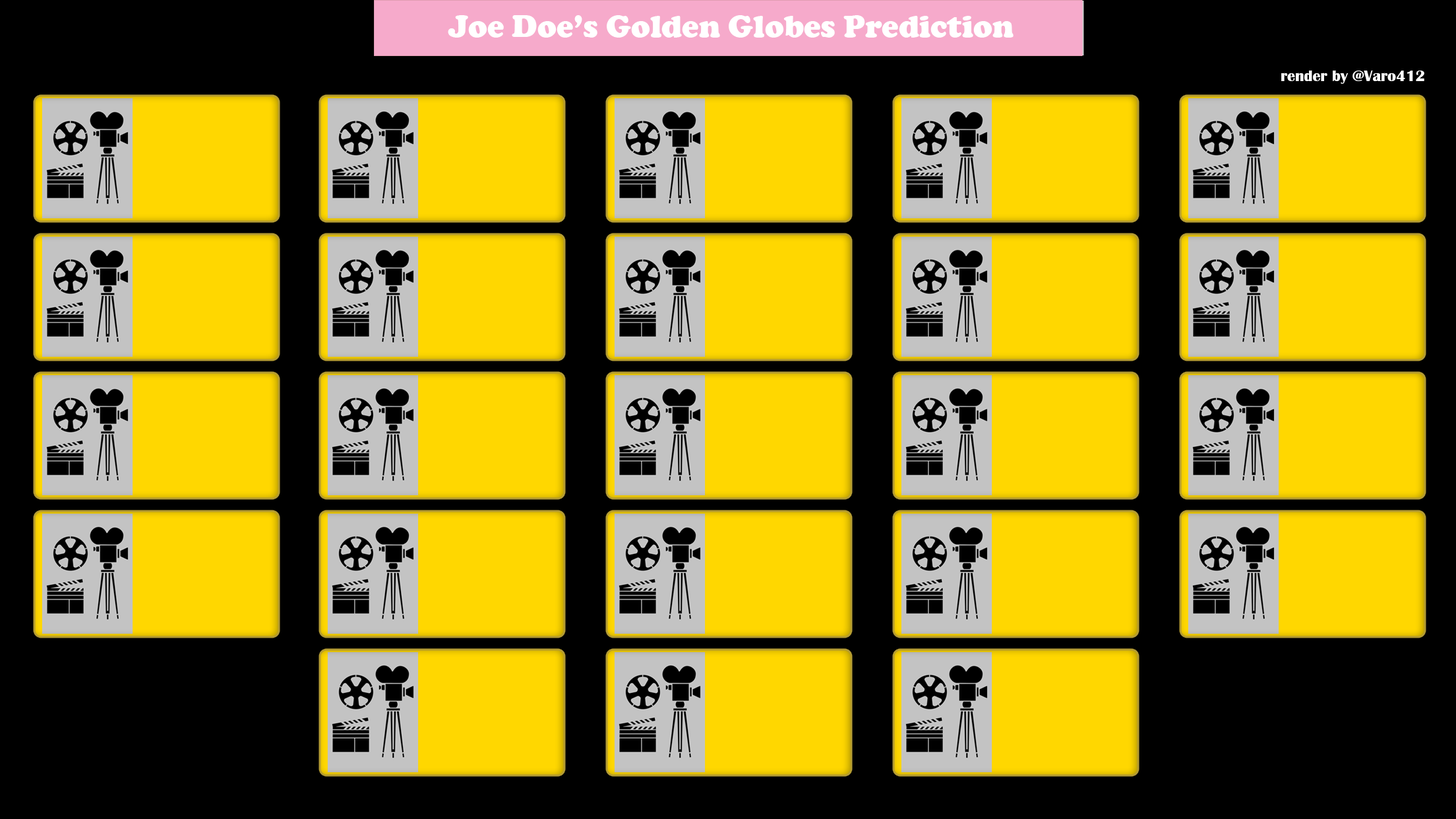
<style>
.page{position:relative;width:1456px;height:819px;background:#000000}
.page>*{position:absolute;margin:0}
.t1{font:31.7px "CooperBlack";color:#ffffff}
.t2{font:15.8px "BritannicBold";color:#ffffff}
</style>
<div class="page">
<p class="t1" style="left:448px;top:15px;width:566px;height:23px">Joe Doe’s Golden Globes Prediction</p>
<p class="t2" style="left:1281px;top:70px;width:143px;height:14px">render by @Varo412</p>
</div>
